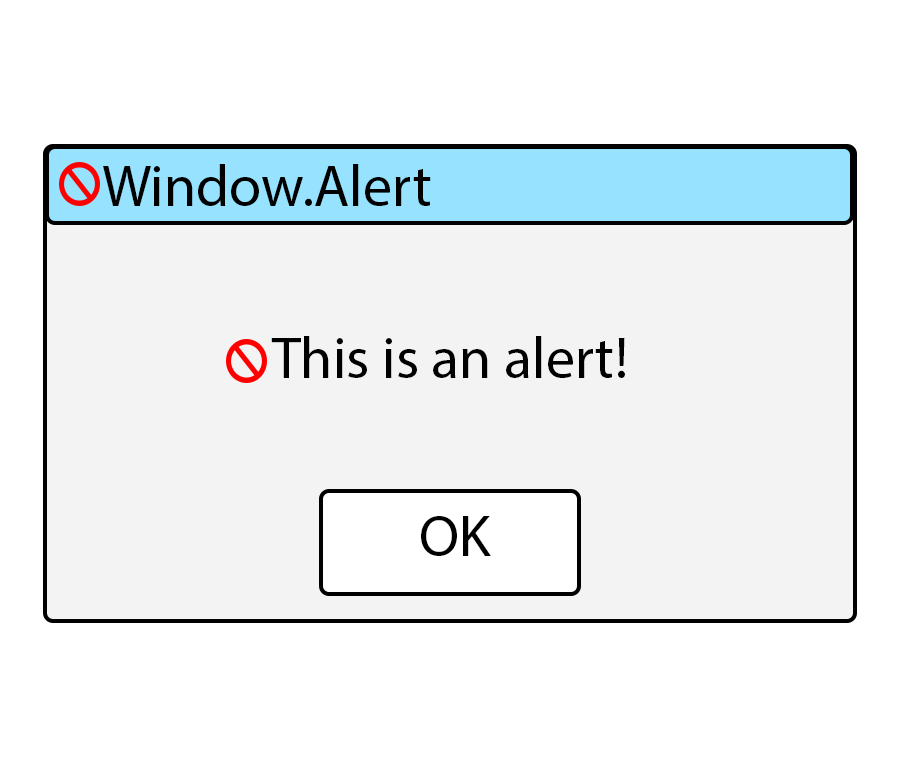
<style>
.page{position:relative;width:900px;height:768px;background:#ffffff}
.page>*{position:absolute;margin:0}
.t1{font:58.3px "MyriadPro-Regular";color:#000000}
</style>
<div class="page">
<p class="t1" style="left:103px;top:164px;width:328px;height:42px">Window.Alert</p>
<p class="t1" style="left:271px;top:336px;width:354px;height:42px">This is an alert!</p>
<p class="t1" style="left:421px;top:516px;width:70px;height:40px">OK</p>
</div>
